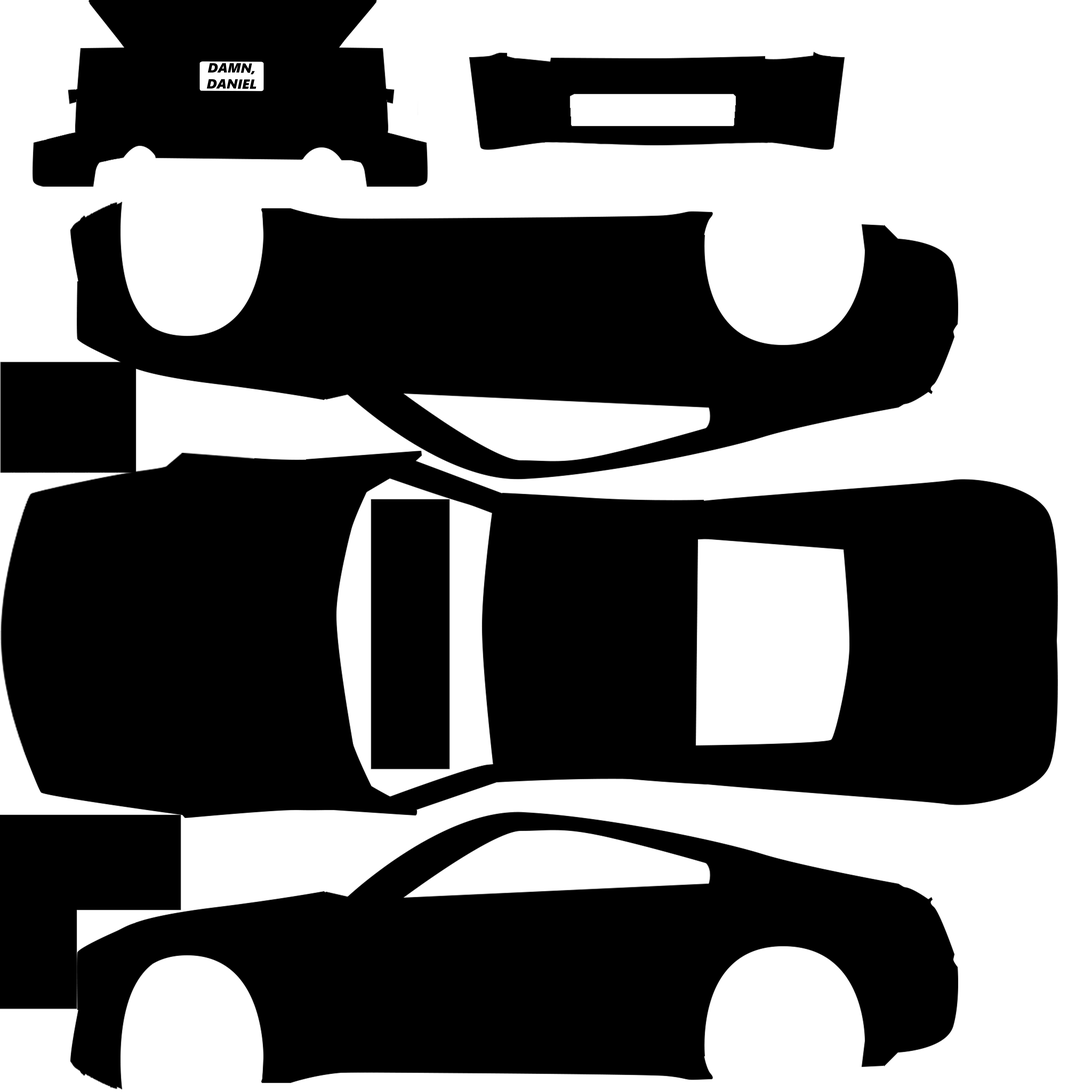
<style>
.page{position:relative;width:1092px;height:1092px;background:#000000}
.page>*{position:absolute;margin:0}
.t1{font:13.3px "SegoeUIBlack-Italic";color:#000000}
</style>
<div class="page">
<p class="t1" style="left:207px;top:63px;width:49px;height:26px;text-align:center">DAMN,<br>DANIEL</p>
</div>
